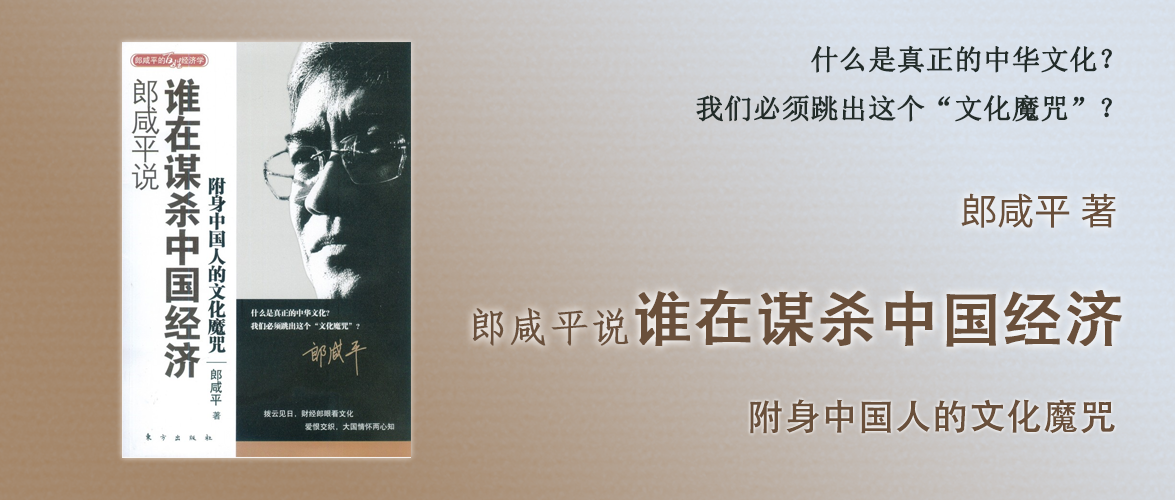
<style>
.page{position:relative;width:1175px;height:500px}
.page>*{position:absolute;margin:0}
.t1{font:28px "SimSun";color:#222c29;font-weight:bold}
.t2{font:36px "KozGoPr6N-Regular";color:#6a503b;font-weight:bold}
.t3{font:60px "AdobeHeitiStd-Regular";color:#6a503b;font-weight:bold}
.t4{font:40px "FangSong";color:#6a503b;font-weight:bold}
.t5{font:36px "AdobeHeitiStd-Regular";color:#6a503b;font-weight:bold}
</style>
<div class="page">
<p class="t1" style="left:696px;top:45px;width:416px;height:77px;text-align:right">什么是真正的中华文化？<br>我们必须跳出这个“文化魔咒”？</p>
<p class="t2" style="left:961px;top:193px;width:155px;height:35px">郎咸平 著</p>
<p class="t3" style="left:472px;top:289px;width:650px;height:58px"><span class="t4">郎咸平说</span>谁在谋杀中国经济</p>
<p class="t5" style="left:750px;top:399px;width:365px;height:35px">附身中国人的文化魔咒</p>
</div>
